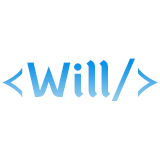
<style>
.page{position:relative;width:160px;height:160px;background:#ffffff}
.page>*{position:absolute;margin:0}
.t1{font:49.3px "KoHo-Bold"}
</style>
<div class="page">
<p class="t1" style="left:2px;top:58px;width:156px;height:43px">&lt;Will/&gt;</p>
</div>
